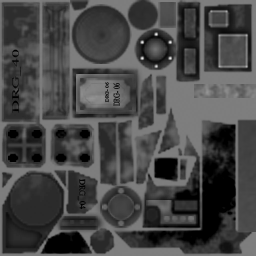
<style>
.page{position:relative;width:256px;height:256px}
.page>*{position:absolute;margin:0}
.t1{font:9.7px "TimesNewRomanPSMT";color:#000000;scale:1.85 1}
.t2{font:4.5px "TimesNewRomanPSMT";color:#171717;scale:1.18 1}
.t3{font:8.5px "TimesNewRomanPSMT";color:#171717;scale:0.73 1}
.t4{font:8.2px "TimesNewRomanPSMT";color:#000000;scale:1.03 1}
</style>
<div class="page">
<p class="t1" style="left:12px;top:49px;width:9px;height:64px;rotate:-90deg">DRG_40</p>
<p class="t2" style="left:105px;top:82px;width:4px;height:21px;rotate:-90deg">DRG- 06</p>
<p class="t3" style="left:113px;top:83px;width:7px;height:23px;rotate:-90deg">DRG- 06</p>
<p class="t4" style="left:77px;top:179px;width:9px;height:31px;rotate:89deg">DRG_04</p>
</div>
